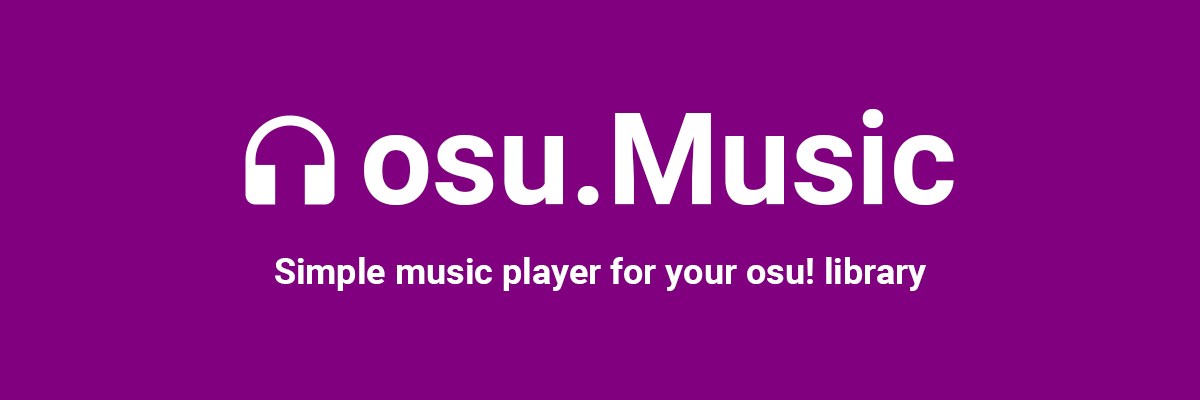
<style>
.page{position:relative;width:1200px;height:400px;background:#800080}
.page>*{position:absolute;margin:0}
.t1{font:128px "Roboto-Bold";color:#ffffff}
.t2{font:36px "Roboto-Bold";color:#ffffff}
</style>
<div class="page">
<p class="t1" style="left:364px;top:109px;width:590px;height:96px">osu.Music</p>
<p class="t2" style="left:275px;top:257px;width:651px;height:34px">Simple music player for your osu! library</p>
</div>
